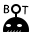
<style>
.page{position:relative;width:32px;height:32px;background:#ffffff}
.page>*{position:absolute;margin:0}
.t1{font:12px "MyriadPro-Regular";color:#000000}
</style>
<div class="page">
<p class="t1" style="left:3px;top:4px;width:26px;height:11px;rotate:2deg">B     T</p>
</div>
